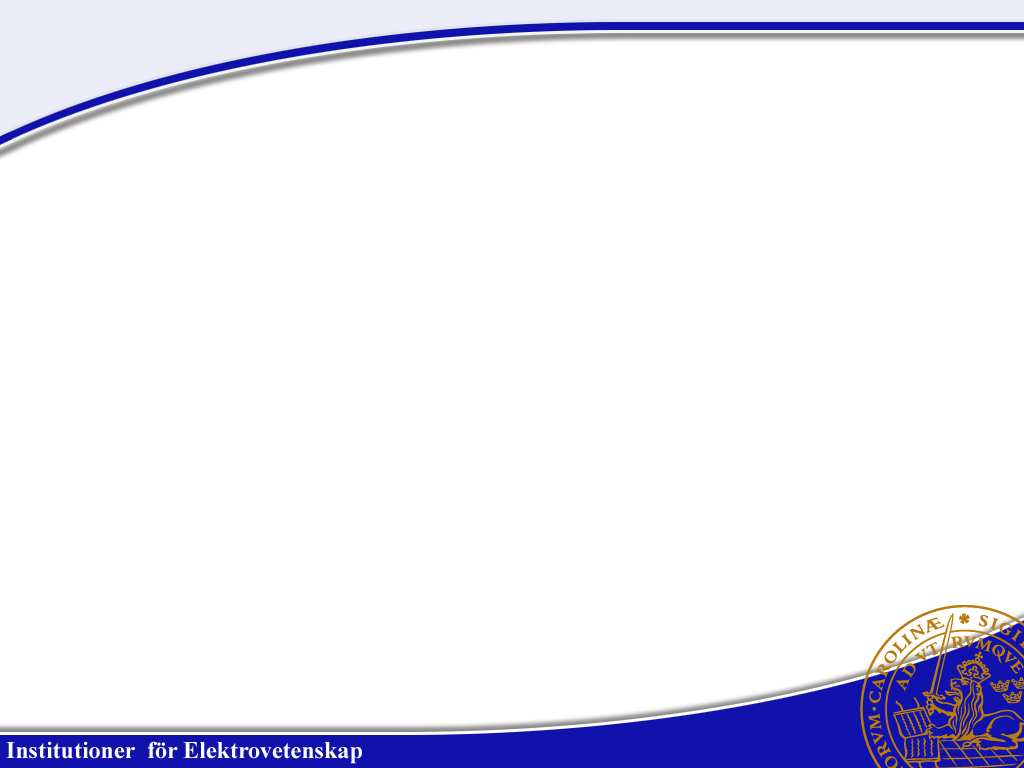
<style>
.page{position:relative;width:1024px;height:768px;background:#ffffff}
.page>*{position:absolute;margin:0}
.t1{font:24px "TimesNewRomanPS-BoldMT";color:#ffffff}
</style>
<div class="page">
<p class="t1" style="left:6px;top:741px;width:356px;height:23px">Institutioner  för Elektrovetenskap</p>
</div>
